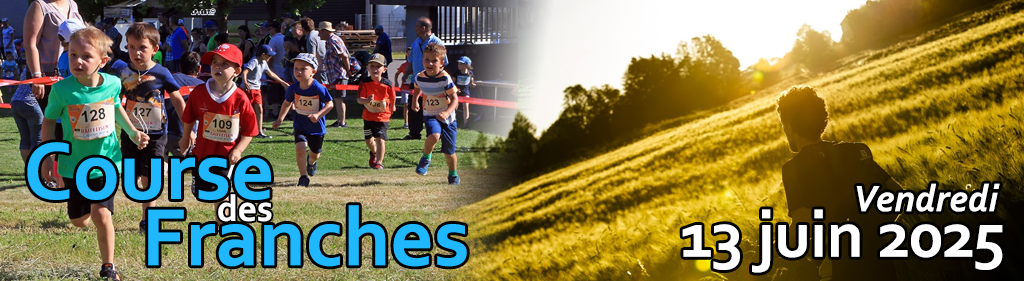
<style>
.page{position:relative;width:1024px;height:281px}
.page>*{position:absolute;margin:0}
.t1{font:84.6px "Corbel-Bold";color:#1fb8fe}
.t2{font:38.3px "Corbel-BoldItalic";color:#ffffff}
.t3{font:37.3px "Corbel-Bold";color:#fefefe}
.t4{font:66.2px "Corbel-Bold";color:#ffffff}
</style>
<div class="page">
<p class="t1" style="left:27px;top:142px;width:244px;height:58px">Course</p>
<p class="t2" style="left:856px;top:183px;width:144px;height:29px">Vendredi</p>
<p class="t3" style="left:218px;top:194px;width:54px;height:28px">des</p>
<p class="t1" style="left:148px;top:205px;width:319px;height:62px">Franches</p>
<p class="t4" style="left:682px;top:209px;width:321px;height:64px">13 juin 2025</p>
</div>
